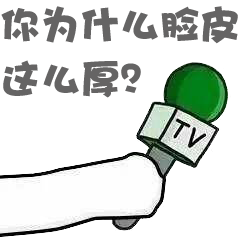
<style>
.page{position:relative;width:240px;height:240px;background:#ffffff}
.page>*{position:absolute;margin:0}
.t1{font:40px "DFHaiBaoW12";color:#656464}
</style>
<div class="page">
<p class="t1" style="left:1px;top:6px;width:237px;height:38px">你为什么脸皮</p>
<p class="t1" style="left:3px;top:60px;width:138px;height:38px">这么厚？</p>
</div>
